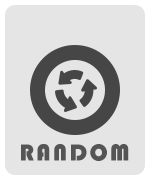
<style>
.page{position:relative;width:150px;height:180px;background:#e5e5e5}
.page>*{position:absolute;margin:0}
.t1{font:24px "Bauhaus93";letter-spacing:0.1em;color:#555555}
</style>
<div class="page">
<p class="t1" style="left:21px;top:144px;width:108px;height:17px">RANDOM</p>
</div>
